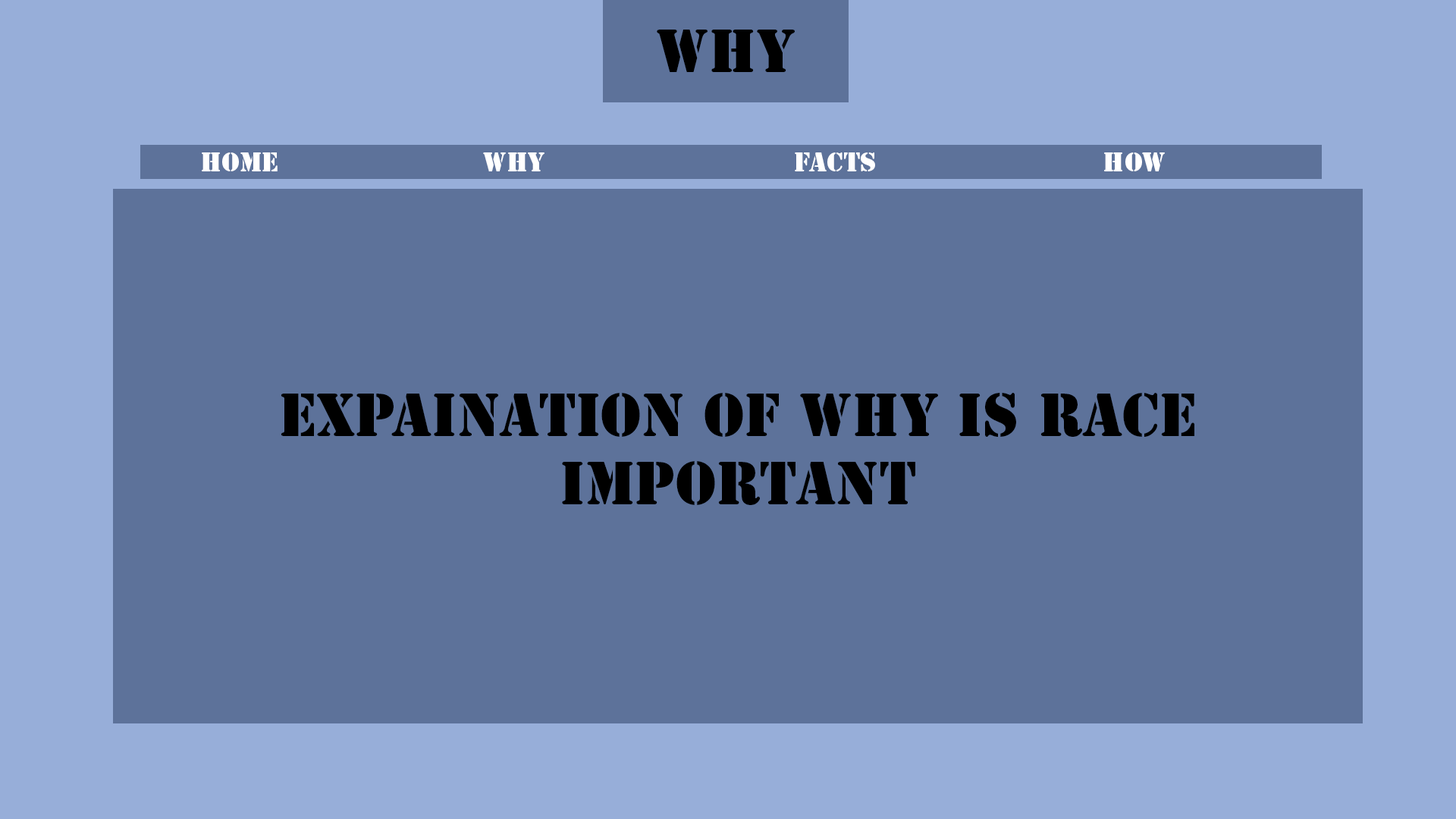
<style>
.page{position:relative;width:1456px;height:819px;background:#5d729a}
.page>*{position:absolute;margin:0}
.t1{font:56.9px "StencilStd";color:#000000}
.t2{font:25.3px "StencilStd";color:#ffffff}
</style>
<div class="page">
<p class="t1" style="left:657px;top:30px;width:138px;height:42px">Why</p>
<p class="t2" style="left:202px;top:152px;width:76px;height:19px">Home</p>
<p class="t2" style="left:483px;top:152px;width:61px;height:19px">Why</p>
<p class="t2" style="left:795px;top:152px;width:80px;height:19px">Facts</p>
<p class="t2" style="left:1104px;top:152px;width:61px;height:19px">How</p>
<p class="t1" style="left:281px;top:393px;width:913px;height:112px;text-align:center">Expaination Of why is race <br>important</p>
</div>
